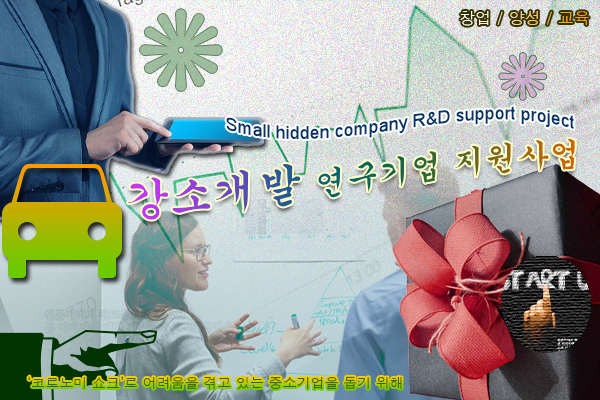
<style>
.page{position:relative;width:600px;height:400px}
.page>*{position:absolute;margin:0}
.t1{font:16px "Dotum"}
.t2{font:18px/18px "ArialMT";color:#003366}
.t3{font:32px/24px "Gungsuh"}
.t4{font:44px/24px "Gungsuh"}
.t5{font:14px "Dotum";color:#336600}
</style>
<div class="page">
<p class="t1" style="left:460px;top:11px;width:129px;height:15px">창업 / 양성 / 교육</p>
<p class="t2" style="left:226px;top:106px;width:348px;height:34px;text-align:center">Small hidden company R&amp;D support project</p>
<p class="t3" style="left:127px;top:138px;width:448px;height:82px;text-align:center"><span class="t4">강소개발 </span>연구기업 지원사업</p>
<p class="t5" style="left:28px;top:376px;width:374px;height:14px">‘코로노미 쇼크’로 어려움을 겪고 있는 중소기업을 돕기 위해</p>
</div>
